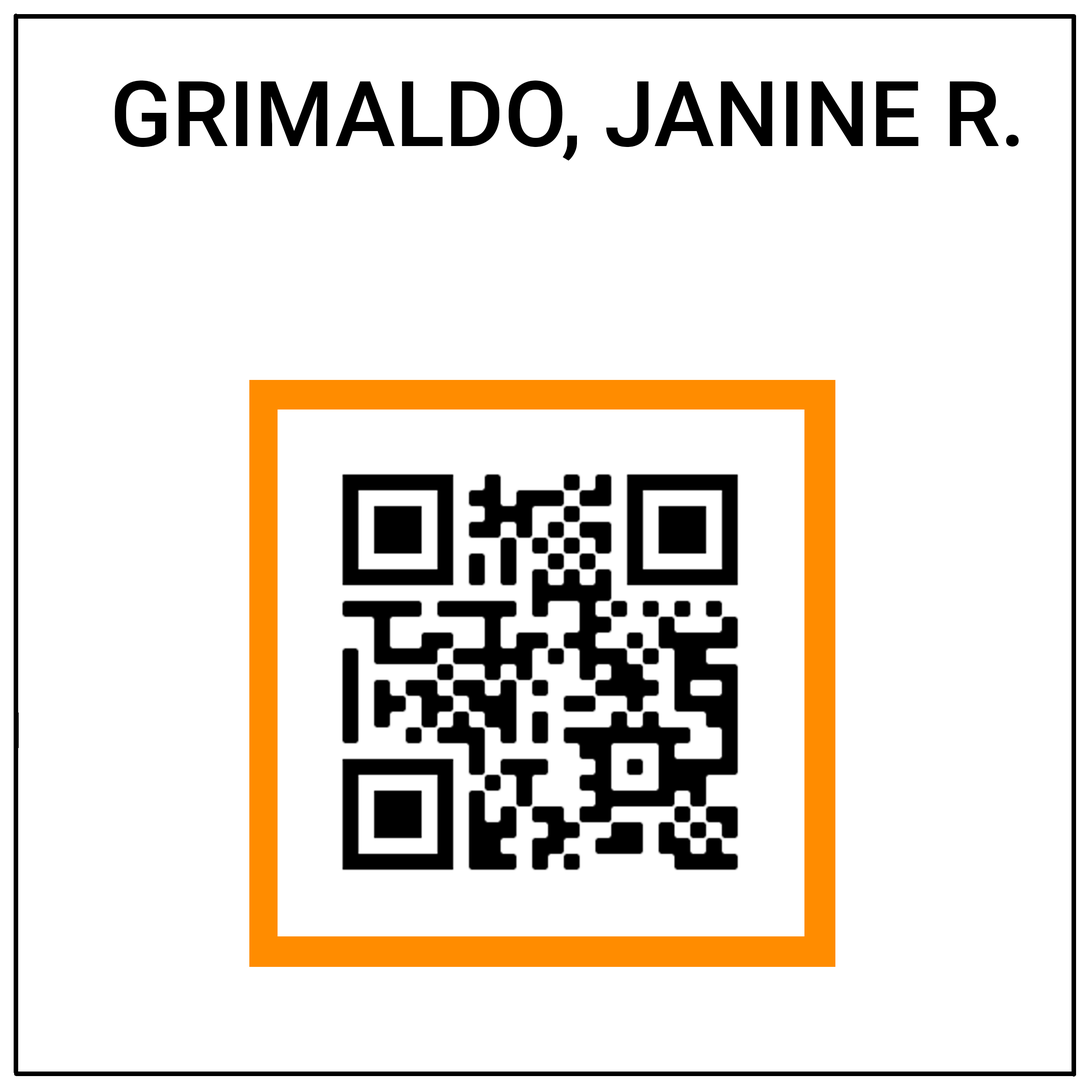
<style>
.page{position:relative;width:1092px;height:1092px;background:#ffffff}
.page>*{position:absolute;margin:0}
.t1{font:91px "Roboto-Medium";color:#000000}
</style>
<div class="page">
<p class="t1" style="left:115px;top:80px;width:904px;height:81px">GRIMALDO, JANINE R.</p>
</div>
